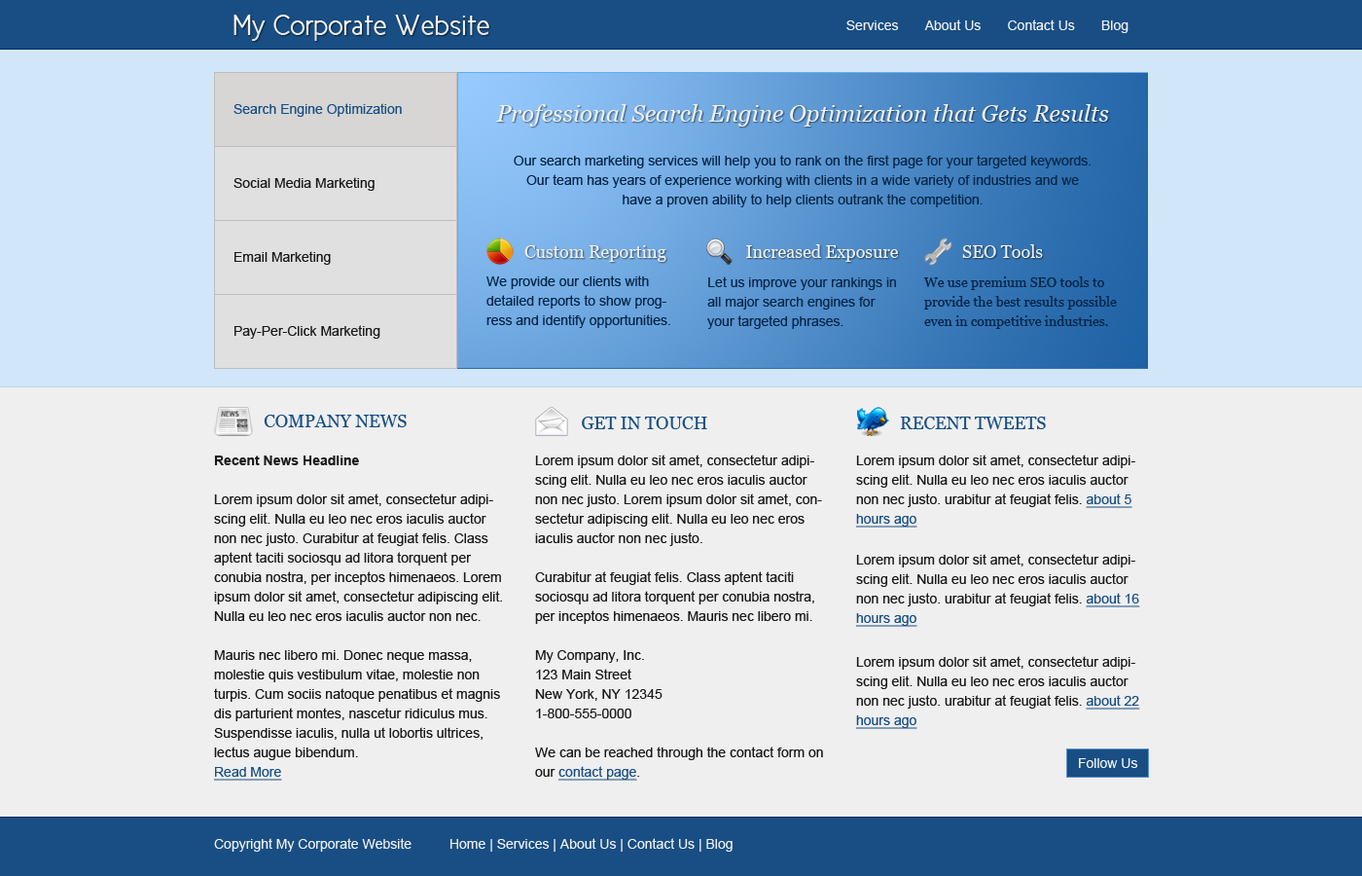
<style>
.page{position:relative;width:1362px;height:876px;background:#efefef}
.page>*{position:absolute;margin:0}
.t1{font:29.2px "NewCicle-Gordita";color:#efefef}
.t2{font:13.6px "ArialMT";color:#efefef}
.t3{font:13.6px "ArialMT";color:#184e84}
.t4{font:23.3px "Georgia-Italic";color:#efefef}
.t5{font:13.6px/19.5px "ArialMT";color:#052648}
.t6{font:13.6px "ArialMT";color:#191919}
.t7{font:17.5px "Georgia";color:#efefef}
.t8{font:17.5px/19.5px "Georgia";color:#efefef}
.t9{font:13.6px/29.2px "ArialMT";color:#052648}
.t10{font:13.6px/19.5px "Georgia";color:#052648}
.t11{font:13.6px/29.2px "Georgia";color:#052648}
.t12{font:17.5px "Georgia";color:#184e84}
.t13{font:13.6px/19.5px "ArialMT";color:#191919}
.t14{font:13.6px/19.5px "Arial-BoldMT";color:#191919}
.t15{font:13.6px/19.5px "ArialMT";color:#184e84;text-decoration:underline}
</style>
<div class="page">
<p class="t1" style="left:233px;top:15px;width:256px;height:26px">My Corporate Website</p>
<p class="t2" style="left:846px;top:19px;width:282px;height:14px">Services       About Us       Contact Us       Blog</p>
<p class="t3" style="left:233px;top:103px;width:169px;height:14px">Search Engine Optimization</p>
<p class="t4" style="left:496px;top:104px;width:613px;height:22px">Professional Search Engine Optimization that Gets Results</p>
<p class="t5" style="left:514px;top:155px;width:577px;height:52px;text-align:center">Our search marketing services will help you to rank on the first page for your targeted keywords.<br>Our team has years of experience working with clients in a wide variety of industries and we<br>have a proven ability to help clients outrank the competition.</p>
<p class="t6" style="left:233px;top:177px;width:142px;height:14px">Social Media Marketing</p>
<p class="t7" style="left:524px;top:245px;width:142px;height:17px">Custom Reporting</p>
<p class="t7" style="left:746px;top:244px;width:152px;height:18px">Increased Exposure</p>
<p class="t7" style="left:962px;top:244px;width:81px;height:14px">SEO Tools</p>
<p class="t6" style="left:234px;top:251px;width:97px;height:14px">Email Marketing</p>
<p class="t5" style="left:486px;top:275px;width:184px;height:53px"><span class="t8">         <br></span><span class="t9">We provide our clients with </span>detailed reports to show progress and identify opportunities.</p>
<p class="t5" style="left:707px;top:276px;width:189px;height:53px"><span class="t8">        <br></span><span class="t9">Let us improve your rankings in</span> all major search engines for your targeted phrases.</p>
<p class="t10" style="left:923px;top:276px;width:194px;height:53px"><span class="t8">         <br></span><span class="t11">We use premium SEO tools to </span>provide the best results possible even in competitive industries.</p>
<p class="t6" style="left:234px;top:325px;width:146px;height:14px">Pay-Per-Click Marketing</p>
<p class="t12" style="left:264px;top:414px;width:143px;height:13px">COMPANY NEWS</p>
<p class="t12" style="left:582px;top:416px;width:125px;height:13px">GET IN TOUCH</p>
<p class="t12" style="left:900px;top:416px;width:146px;height:13px">RECENT TWEETS</p>
<p class="t13" style="left:214px;top:455px;width:288px;height:325px"><span class="t14">Recent News Headline<br></span><br>Lorem ipsum dolor sit amet, consectetur adipiscing elit. Nulla eu leo nec eros iaculis auctor non nec justo. Curabitur at feugiat felis. Class aptent taciti sociosqu ad litora torquent per conubia nostra, per inceptos himenaeos. Lorem ipsum dolor sit amet, consectetur adipiscing elit. Nulla eu leo nec eros iaculis auctor non nec.<br><br>Mauris nec libero mi. Donec neque massa, molestie quis vestibulum vitae, molestie non turpis. Cum sociis natoque penatibus et magnis dis parturient montes, nascetur ridiculus mus. Suspendisse iaculis, nulla ut lobortis ultrices, lectus augue bibendum.<br><span class="t15">Read More</span></p>
<p class="t13" style="left:535px;top:454px;width:288px;height:326px">Lorem ipsum dolor sit amet, consectetur adipiscing elit. Nulla eu leo nec eros iaculis auctor non nec justo. Lorem ipsum dolor sit amet, consectetur adipiscing elit. Nulla eu leo nec eros iaculis auctor non nec justo. <br><br>Curabitur at feugiat felis. Class aptent taciti sociosqu ad litora torquent per conubia nostra, per inceptos himenaeos. Mauris nec libero mi. <br><br>My Company, Inc.<br>123 Main Street<br>New York, NY 12345<br>1-800-555-0000<br><br>We can be reached through the contact form on our <span class="t15">contact page</span>.</p>
<p class="t13" style="left:856px;top:454px;width:279px;height:73px">Lorem ipsum dolor sit amet, consectetur adipiscing elit. Nulla eu leo nec eros iaculis auctor non nec justo. urabitur at feugiat felis. <span class="t15">about 5 hours ago</span></p>
<p class="t13" style="left:856px;top:554px;width:284px;height:72px">Lorem ipsum dolor sit amet, consectetur adipiscing elit. Nulla eu leo nec eros iaculis auctor non nec justo. urabitur at feugiat felis. <span class="t15">about 16 hours ago</span></p>
<p class="t13" style="left:856px;top:656px;width:284px;height:73px">Lorem ipsum dolor sit amet, consectetur adipiscing elit. Nulla eu leo nec eros iaculis auctor non nec justo. urabitur at feugiat felis. <span class="t15">about 22 hours ago</span></p>
<p class="t2" style="left:1079px;top:758px;width:59px;height:10px">Follow Us</p>
<p class="t2" style="left:214px;top:838px;width:519px;height:13px">Copyright My Corporate Website          Home | Services | About Us | Contact Us | Blog</p>
</div>
